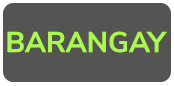
<style>
.page{position:relative;width:174px;height:86px;background:#545552}
.page>*{position:absolute;margin:0}
.t1{font:28.4px "NunitoSans-Bold";color:#abf94a}
</style>
<div class="page">
<p class="t1" style="left:7px;top:31px;width:160px;height:22px">BARANGAY</p>
</div>
